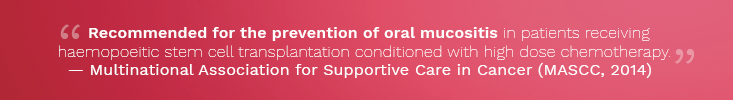
<style>
.page{position:relative;width:733px;height:100px}
.page>*{position:absolute;margin:0}
.t1{font:16px "WorkSans-Thin";letter-spacing:0.025em;color:#ffffff}
.t2{font:16px "WorkSans-SemiBold";letter-spacing:0.01em;color:#ffffff}
.t3{font:72px "WorkSans-Light";letter-spacing:0.01em;color:#d07e87}
.t4{font:72px "WorkSans-Light";letter-spacing:0.01em;color:#ea98a5}
.t5{font:16px "WorkSans-Regular";letter-spacing:0.01em;color:#ffffff}
</style>
<div class="page">
<p class="t1" style="left:59px;top:27px;width:612px;height:33px"><span class="t2">      Recommended for the prevention of oral mucositis </span>in patients receiving haemopoeitic stem cell transplantation conditioned with high dose chemotherapy.</p>
<p class="t3" style="left:60px;top:24px;width:20px;height:15px">“</p>
<p class="t4" style="left:674px;top:49px;width:21px;height:15px">”</p>
<p class="t5" style="left:68px;top:62px;width:583px;height:17px">— Multinational Association for Supportive Care in Cancer (MASCC, 2014)</p>
</div>
